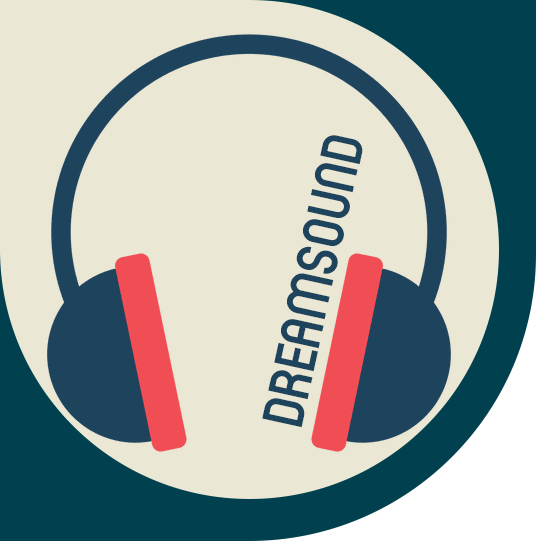
<style>
.page{position:relative;width:536px;height:541px;background:#eae7d4}
.page>*{position:absolute;margin:0}
.t1{font:72px "Circula-Medium";color:#1e435c}
</style>
<div class="page">
<p class="t1" style="left:262px;top:135px;width:101px;height:293px;rotate:-78deg">dreamsound</p>
</div>
